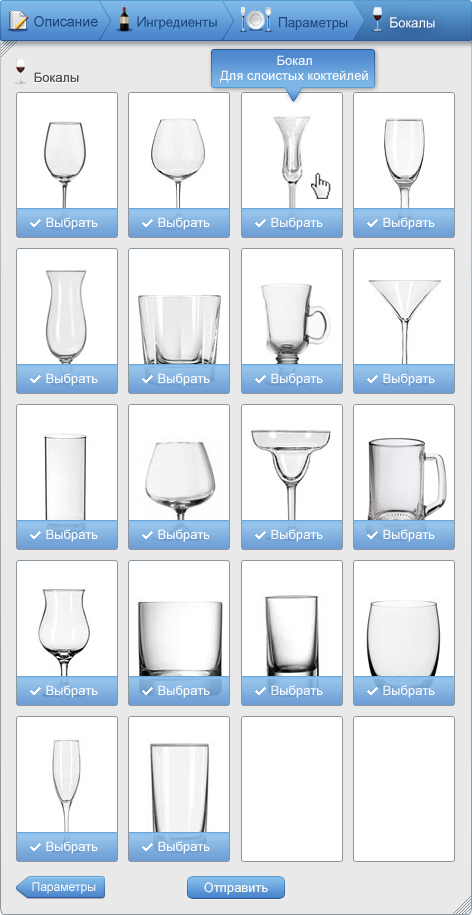
<style>
.page{position:relative;width:472px;height:915px;background:#ffffff}
.page>*{position:absolute;margin:0}
.t1{font:14px "ArialMT";color:#1b4680;font-weight:bold}
.t2{font:13px "ArialMT";color:#1b4680;font-weight:bold}
.t3{font:13px "ArialMT";color:#ffffff;font-weight:bold}
.t4{font:14px "ArialMT";color:#ffffff;font-weight:bold}
.t5{font:13px "ArialMT";color:#ffffff}
.t6{font:13px "ArialMT";color:#505050}
.t7{font:12px "ArialMT";color:#ffffff}
.t8{font:13px "ArialMT";color:#f5f5f5}
</style>
<div class="page">
<p class="t1" style="left:34px;top:16px;width:64px;height:11px">Описание</p>
<p class="t2" style="left:137px;top:16px;width:80px;height:14px"><span class="t1">И</span>нгредиенты</p>
<p class="t2" style="left:279px;top:17px;width:69px;height:13px"><span class="t1">П</span>араметры</p>
<p class="t3" style="left:390px;top:17px;width:45px;height:11px"><span class="t4">Б</span>окалы</p>
<p class="t5" style="left:277px;top:55px;width:35px;height:10px">Бокал</p>
<p class="t6" style="left:34px;top:72px;width:45px;height:10px">Бокалы</p>
<p class="t5" style="left:220px;top:70px;width:148px;height:13px">Для слоистых коктейлей</p>
<p class="t5" style="left:46px;top:217px;width:52px;height:13px">Выбрать</p>
<p class="t5" style="left:158px;top:217px;width:52px;height:13px">Выбрать</p>
<p class="t5" style="left:271px;top:217px;width:52px;height:13px">Выбрать</p>
<p class="t5" style="left:383px;top:217px;width:52px;height:13px">Выбрать</p>
<p class="t5" style="left:46px;top:373px;width:52px;height:13px">Выбрать</p>
<p class="t5" style="left:158px;top:373px;width:52px;height:13px">Выбрать</p>
<p class="t5" style="left:271px;top:373px;width:52px;height:13px">Выбрать</p>
<p class="t5" style="left:383px;top:373px;width:52px;height:13px">Выбрать</p>
<p class="t5" style="left:46px;top:529px;width:52px;height:13px">Выбрать</p>
<p class="t5" style="left:158px;top:529px;width:52px;height:13px">Выбрать</p>
<p class="t5" style="left:271px;top:529px;width:52px;height:13px">Выбрать</p>
<p class="t5" style="left:383px;top:529px;width:52px;height:13px">Выбрать</p>
<p class="t5" style="left:46px;top:685px;width:52px;height:13px">Выбрать</p>
<p class="t5" style="left:158px;top:685px;width:52px;height:13px">Выбрать</p>
<p class="t5" style="left:271px;top:685px;width:52px;height:13px">Выбрать</p>
<p class="t5" style="left:383px;top:685px;width:52px;height:13px">Выбрать</p>
<p class="t5" style="left:46px;top:841px;width:52px;height:13px">Выбрать</p>
<p class="t5" style="left:158px;top:841px;width:52px;height:13px">Выбрать</p>
<p class="t7" style="left:32px;top:882px;width:64px;height:12px">Параметры</p>
<p class="t8" style="left:204px;top:882px;width:64px;height:13px">Отправить</p>
</div>
